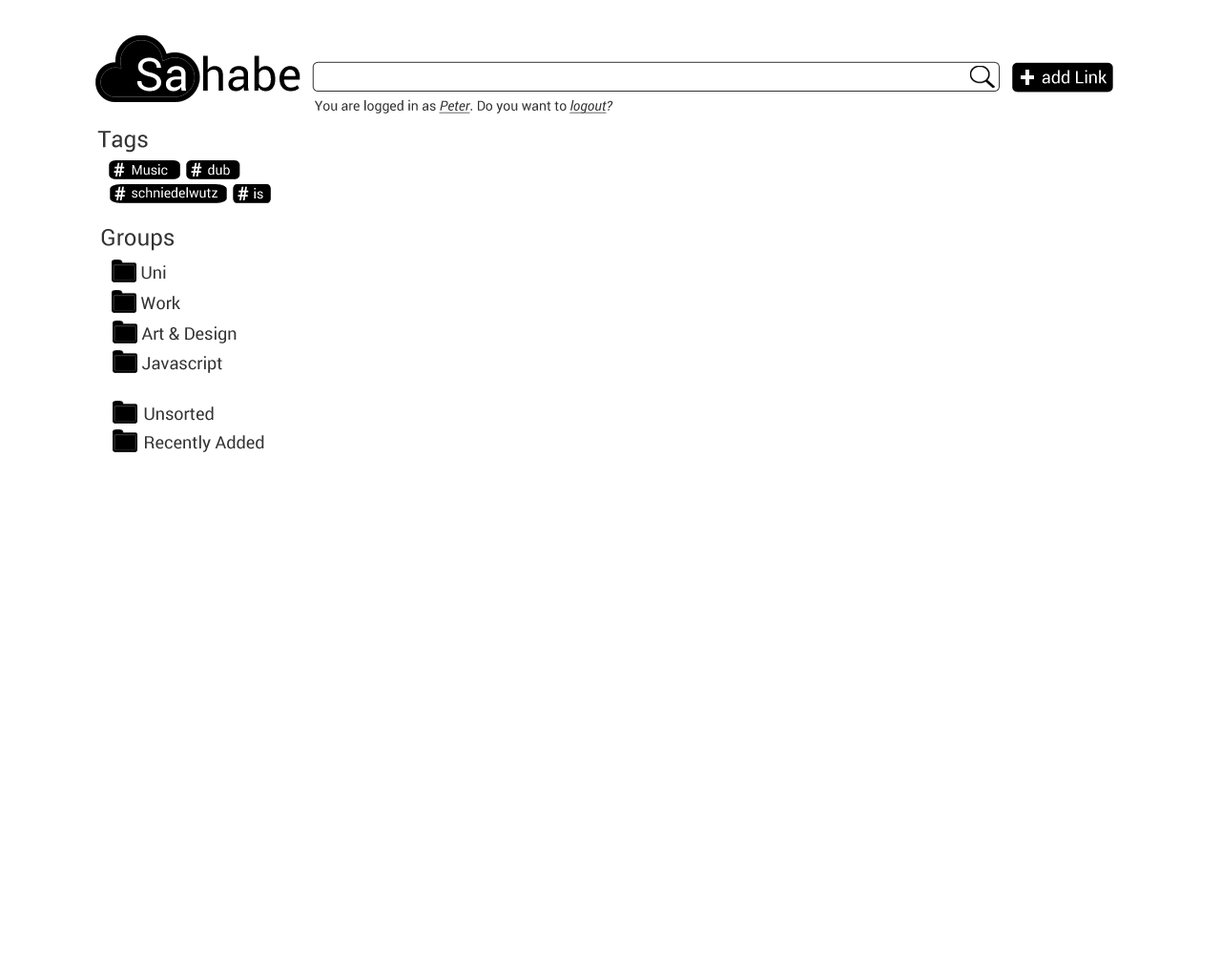
<style>
.page{position:relative;width:1221px;height:977px;background:#ffffff}
.page>*{position:absolute;margin:0}
.t1{font:28.6px "Roboto-Bold";color:#ffffff}
.t2{font:17.2px "Roboto-Regular";color:#ffffff}
.t3{font:13.4px "Roboto-Regular";color:#333333}
.t4{font:13.4px "Roboto-Italic";color:#333333;text-decoration:underline}
.t5{font:13.4px "Roboto-Italic";color:#333333}
.t6{font:22.9px "Roboto-Regular";color:#333333}
.t7{font:19.1px "Roboto-Bold";color:#ffffff}
.t8{font:13.4px "Roboto-Regular";color:#ffffff}
.t9{font:17.2px "Roboto-Regular";color:#333333}
</style>
<div class="page">
<p class="t1" style="left:1021px;top:70px;width:13px;height:15px">+</p>
<p class="t2" style="left:1042px;top:70px;width:65px;height:14px">add Link</p>
<p class="t3" style="left:315px;top:99px;width:298px;height:15px">You are logged in as <span class="t4">Peter</span>. Do you want to <span class="t4">logout</span><span class="t5">?</span></p>
<p class="t6" style="left:97px;top:131px;width:51px;height:22px">Tags</p>
<p class="t7" style="left:114px;top:162px;width:11px;height:14px">#</p>
<p class="t8" style="left:132px;top:164px;width:36px;height:12px">Music</p>
<p class="t7" style="left:191px;top:162px;width:11px;height:14px">#</p>
<p class="t8" style="left:208px;top:164px;width:22px;height:12px">dub</p>
<p class="t7" style="left:114px;top:186px;width:12px;height:14px">#</p>
<p class="t7" style="left:237px;top:186px;width:12px;height:14px">#</p>
<p class="t8" style="left:132px;top:187px;width:85px;height:11px">schniedelwutz</p>
<p class="t8" style="left:254px;top:188px;width:9px;height:11px">is</p>
<p class="t6" style="left:101px;top:229px;width:73px;height:22px">Groups</p>
<p class="t9" style="left:141px;top:265px;width:25px;height:14px">Uni</p>
<p class="t9" style="left:141px;top:296px;width:39px;height:14px">Work</p>
<p class="t9" style="left:141px;top:326px;width:96px;height:17px">Art &amp; Design</p>
<p class="t9" style="left:142px;top:356px;width:80px;height:17px">Javascript</p>
<p class="t9" style="left:144px;top:406px;width:70px;height:15px">Unsorted</p>
<p class="t9" style="left:145px;top:435px;width:119px;height:17px">Recently Added</p>
</div>
